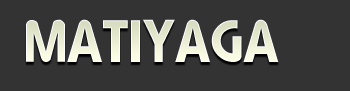
<style>
.page{position:relative;width:350px;height:91px;background:#333333}
.page>*{position:absolute;margin:0}
.t1{font:60px "Cremona";color:#f0f2db}
</style>
<div class="page">
<p class="t1" style="left:26px;top:19px;width:253px;height:43px">MATIYAGA</p>
</div>
